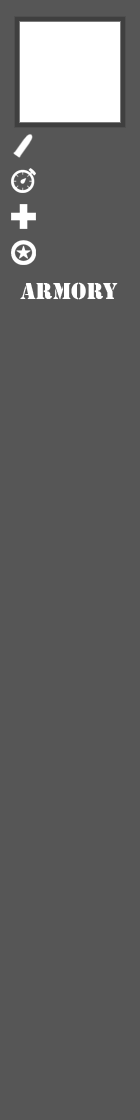
<style>
.page{position:relative;width:140px;height:1120px;background:#565656}
.page>*{position:absolute;margin:0}
.t1{font:24px "Stencil";color:#ffffff}
</style>
<div class="page">
<p class="t1" style="left:20px;top:282px;width:98px;height:18px">ARMORY</p>
</div>
